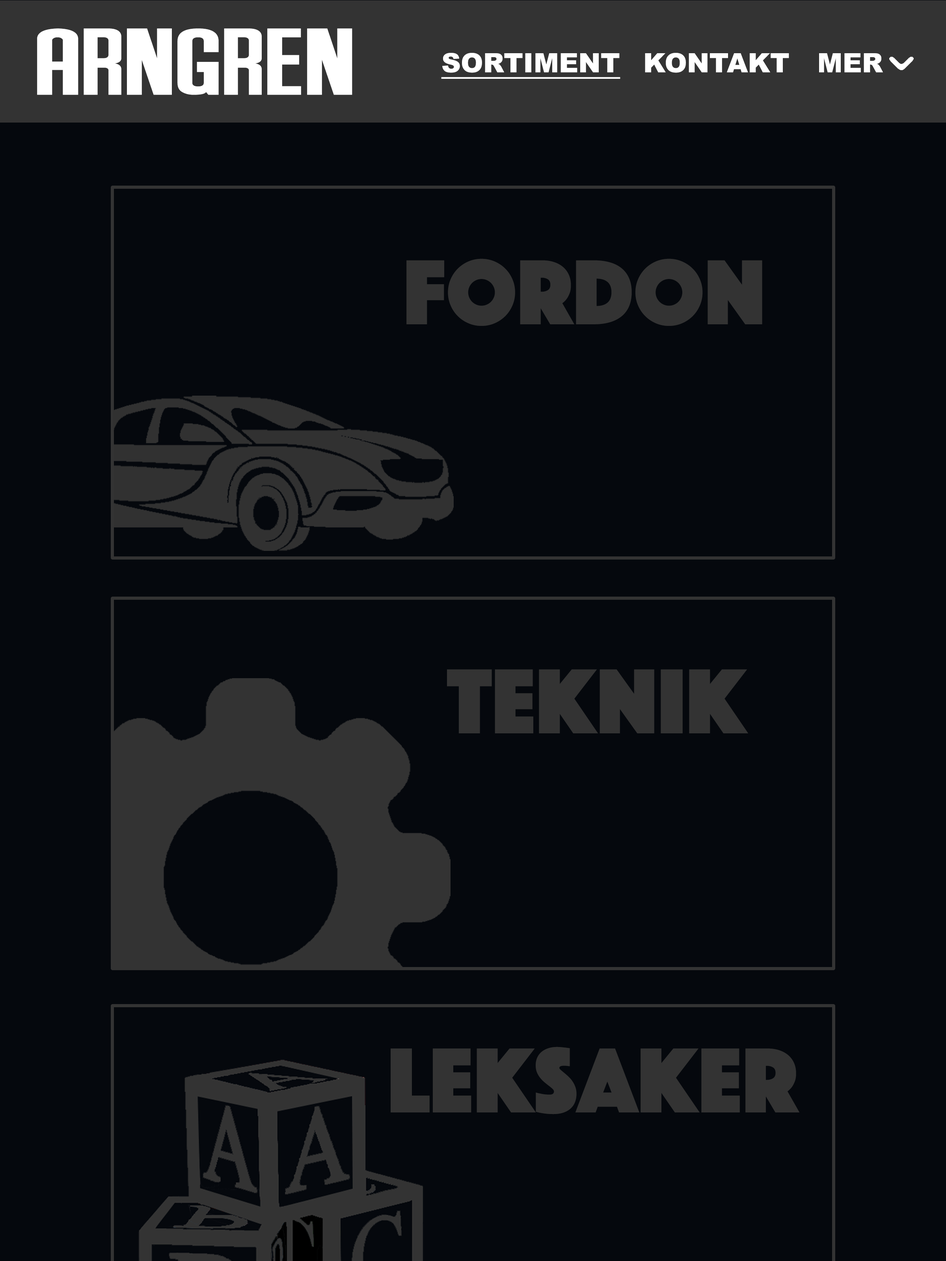
<style>
.page{position:relative;width:946px;height:1261px;background:#05080d}
.page>*{position:absolute;margin:0}
.t1{font:94.6px "AndersonSupercar";color:#ffffff;scale:1.55 1}
.t2{font:26.5px "Arial-Black";color:#ffffff;text-decoration:underline}
.t3{font:26.5px "Arial-Black";color:#ffffff}
.t4{font:95.7px "Phosphate-Solid";color:#333333}
</style>
<div class="page">
<p class="t1" style="left:37px;top:28px;width:315px;height:67px">ARNGREN</p>
<p class="t2" style="left:441px;top:53px;width:179px;height:26px">SORTIMENT</p>
<p class="t3" style="left:645px;top:53px;width:144px;height:20px">KONTAKT</p>
<p class="t3" style="left:819px;top:53px;width:64px;height:20px">MER</p>
<p class="t4" style="left:406px;top:258px;width:356px;height:68px">Fordon</p>
<p class="t4" style="left:447px;top:669px;width:301px;height:64px">Teknik</p>
<p class="t4" style="left:390px;top:1047px;width:409px;height:67px">Leksaker</p>
</div>
